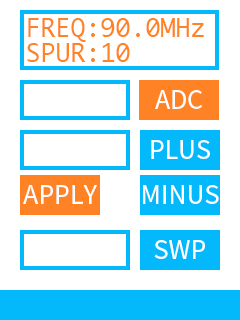
<style>
.page{position:relative;width:240px;height:320px;background:#ffffff}
.page>*{position:absolute;margin:0}
.t1{font:25px/25px "Monaco";color:#ff8324}
.t2{font:25px "SourceHanSansHC-Regular";color:#ffffff}
</style>
<div class="page">
<p class="t1" style="left:27px;top:18px;width:177px;height:44px">FREQ:90.0MHz<br>SPUR:10</p>
<p class="t2" style="left:155px;top:90px;width:47px;height:19px">ADC</p>
<p class="t2" style="left:151px;top:140px;width:59px;height:19px">PLUS</p>
<p class="t2" style="left:23px;top:185px;width:74px;height:19px">APPLY</p>
<p class="t2" style="left:143px;top:185px;width:76px;height:19px">MINUS</p>
<p class="t2" style="left:154px;top:240px;width:51px;height:19px">SWP</p>
</div>
